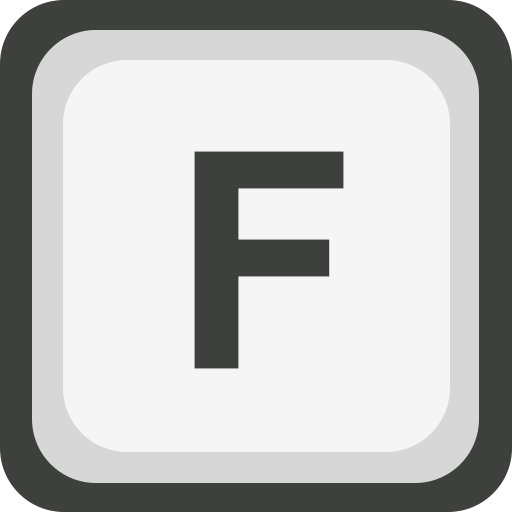
<style>
.page{position:relative;width:512px;height:512px;background:#f5f5f5}
.page>*{position:absolute;margin:0}
.t1{font:302.8px "Arial-BoldMT";color:#3e403e}
</style>
<div class="page">
<p class="t1" style="left:194px;top:151px;width:150px;height:218px">F</p>
</div>
